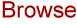
<style>
.page{position:relative;width:77px;height:24px;background:#ffffff}
.page>*{position:absolute;margin:0}
.t1{font:22.7px "ArialMT";color:#a10000}
</style>
<div class="page">
<p class="t1" style="left:2px;top:1px;width:74px;height:17px">Browse</p>
</div>
